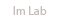
<style>
.page{position:relative;width:60px;height:22px;background:#ffffff}
.page>*{position:absolute;margin:0}
.t1{font:12px "MyriadPro-Regular";color:#c6bdbd}
</style>
<div class="page">
<p class="t1" style="left:13px;top:6px;width:34px;height:9px">Im Lab</p>
</div>
